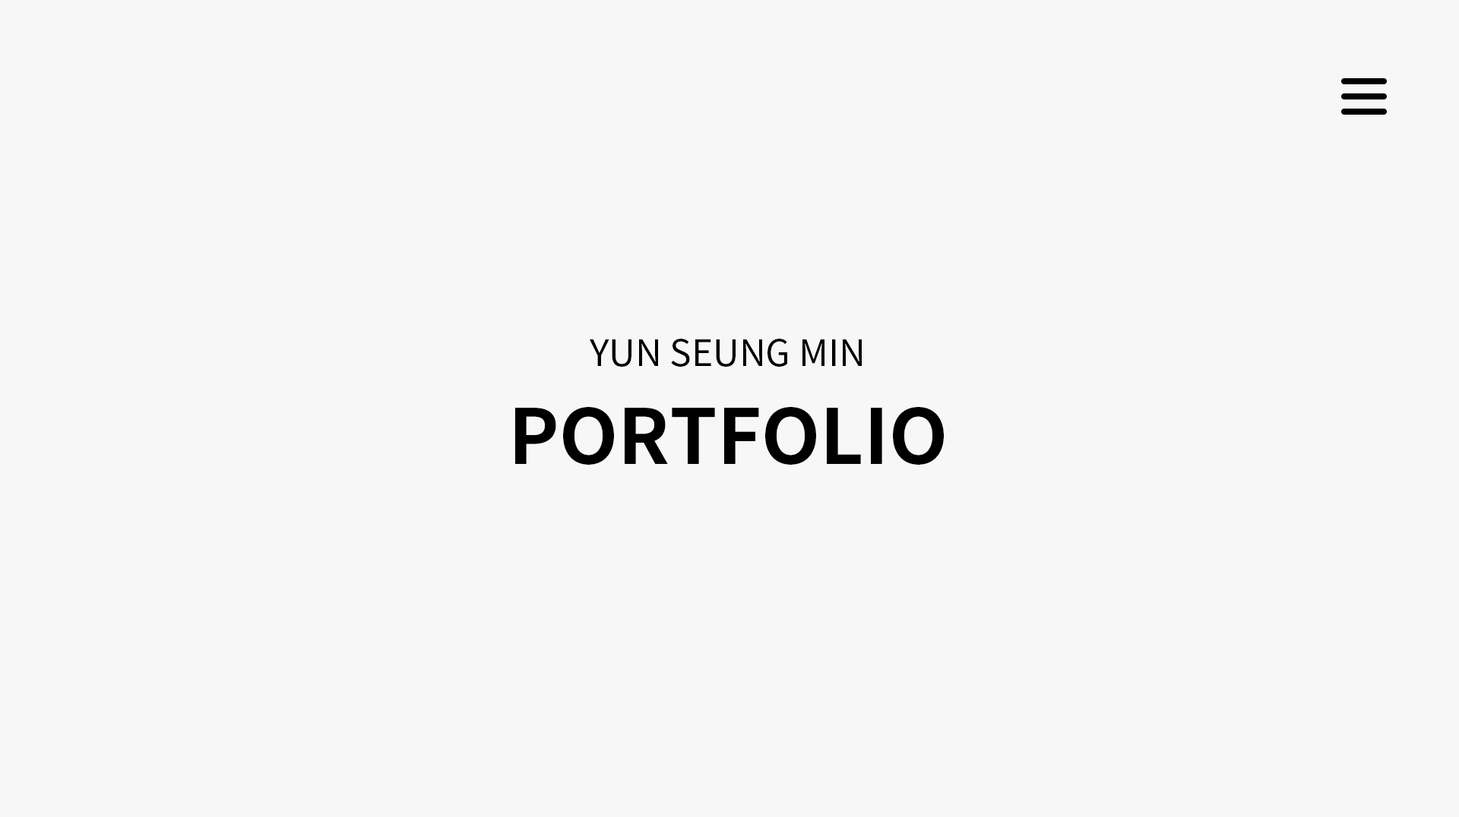
<style>
.page{position:relative;width:1459px;height:817px;background:#f7f7f7}
.page>*{position:absolute;margin:0}
.t1{font:36.5px "NotoSansKR-Regular";color:#000000}
.t2{font:76px "NotoSansKR-Bold";color:#000000}
</style>
<div class="page">
<p class="t1" style="left:590px;top:339px;width:272px;height:28px">YUN SEUNG MIN</p>
<p class="t2" style="left:515px;top:407px;width:429px;height:58px">PORTFOLIO</p>
</div>
